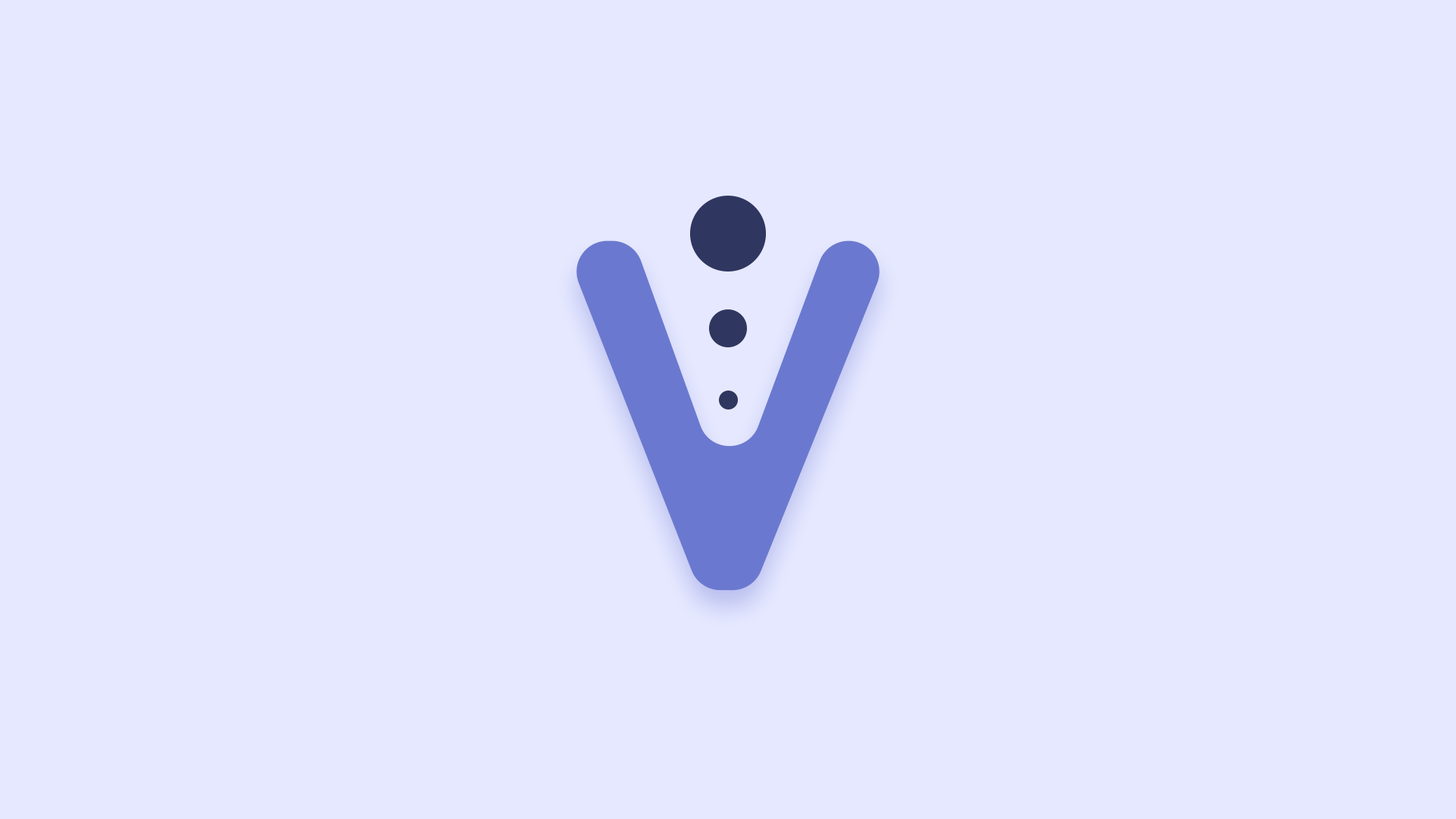
<style>
.page{position:relative;width:1456px;height:819px;background:#e6e8ff}
.page>*{position:absolute;margin:0}
.t1{font:505.5px "RivieraRegular";color:#6574cd}
</style>
<div class="page">
<p class="t1" style="left:576px;top:240px;width:304px;height:351px;opacity:0.97">V</p>
</div>
